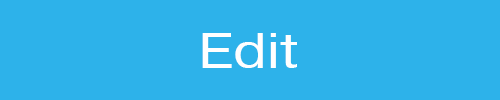
<style>
.page{position:relative;width:500px;height:100px;background:#2db2ea}
.page>*{position:absolute;margin:0}
.t1{font:48px "Helvetica";color:#ffffff;scale:1.2 1}
</style>
<div class="page">
<p class="t1" style="left:202px;top:33px;width:95px;height:35px">Edit</p>
</div>
